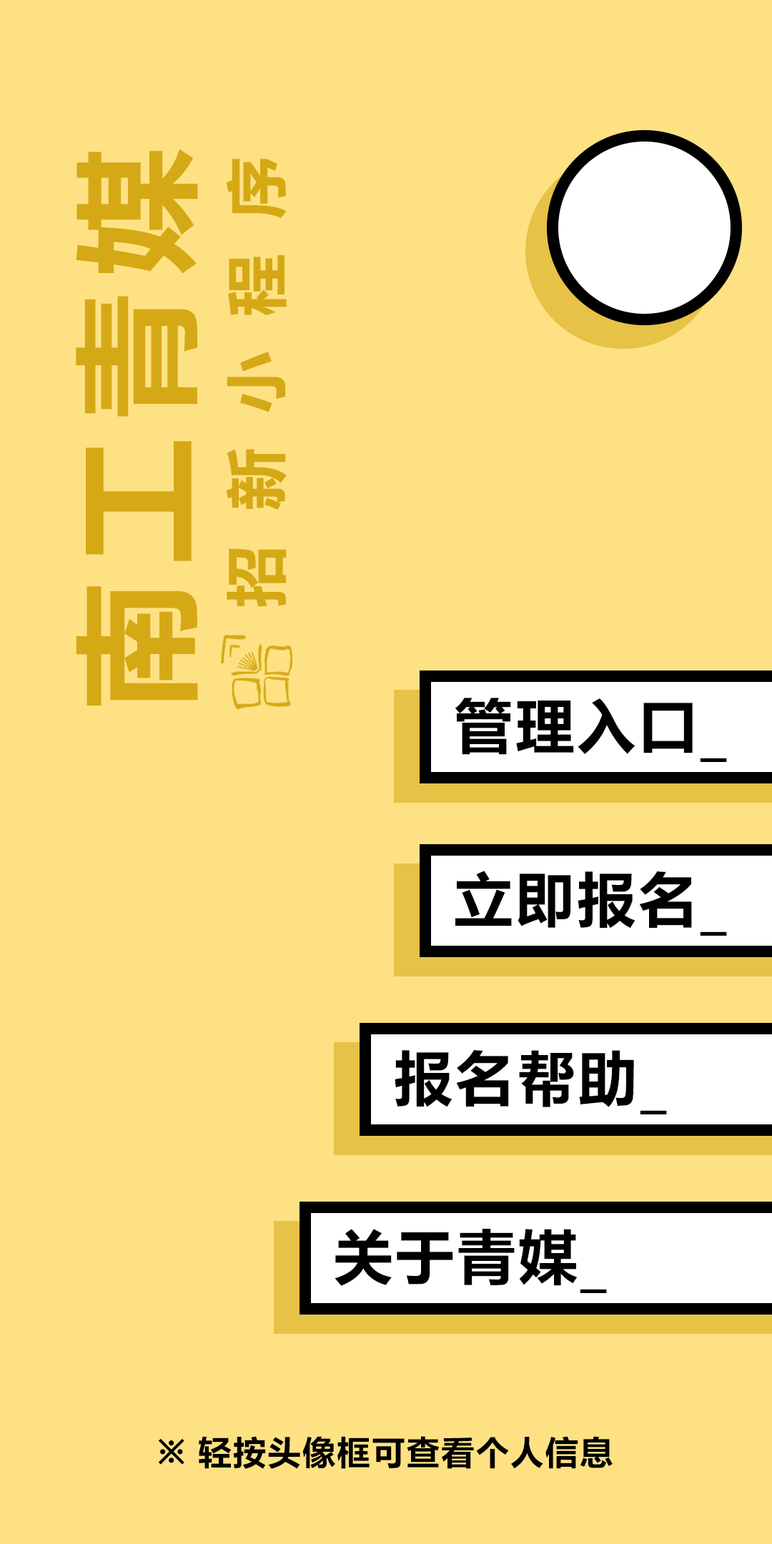
<style>
.page{position:relative;width:772px;height:1544px;background:#fee183}
.page>*{position:absolute;margin:0}
.t1{font:125.8px "MicrosoftYaHei-Bold";letter-spacing:0.15em;color:#d5a915}
.t2{font:61.8px "MicrosoftYaHei-Bold";letter-spacing:0.57em;color:#d5a915}
.t3{font:58.6px "MicrosoftYaHei-Bold";letter-spacing:0.05em;color:#000000}
.t4{font:33px "MicrosoftYaHei-Bold";letter-spacing:0.05em;color:#000000}
</style>
<div class="page">
<p class="t1" style="left:76px;top:149px;width:122px;height:557px;rotate:-90deg">南工青媒</p>
<p class="t2" style="left:226px;top:159px;width:61px;height:448px;rotate:-90deg">招新小程序</p>
<p class="t3" style="left:455px;top:698px;width:272px;height:64px">管理入口_</p>
<p class="t3" style="left:455px;top:871px;width:272px;height:65px">立即报名_</p>
<p class="t3" style="left:395px;top:1050px;width:272px;height:65px">报名帮助_</p>
<p class="t3" style="left:335px;top:1229px;width:272px;height:64px">关于青媒_</p>
<p class="t4" style="left:158px;top:1436px;width:455px;height:33px">※ 轻按头像框可查看个人信息</p>
</div>
